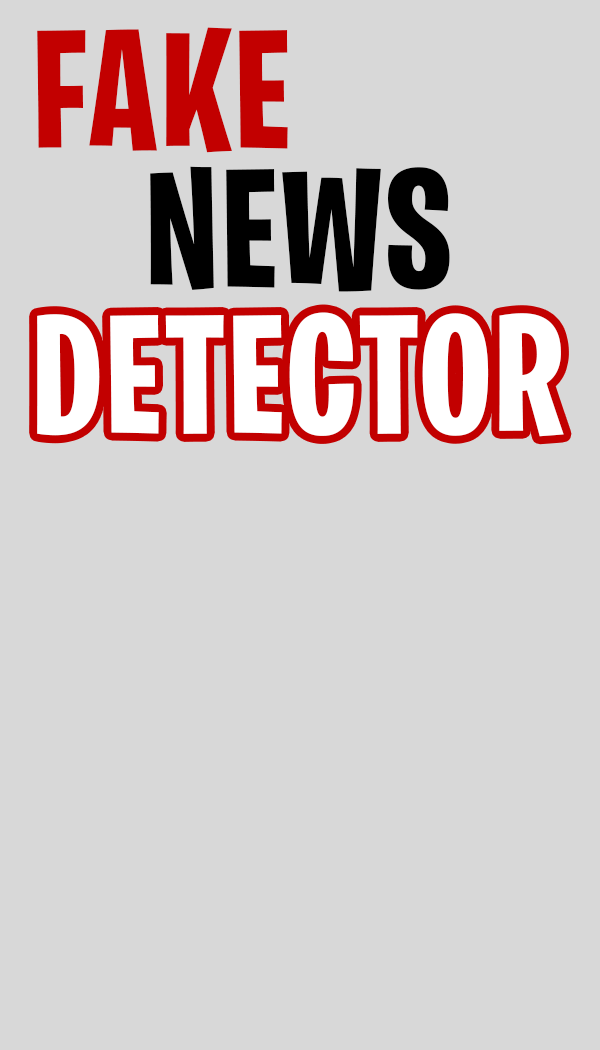
<style>
.page{position:relative;width:600px;height:1050px;background:#d8d8d8}
.page>*{position:absolute;margin:0}
.t1{font:168.9px "BurbankBigCondensed-Bold";letter-spacing:0.025em;color:#c20000}
.t2{font:168.9px "BurbankBigCondensed-Bold";letter-spacing:0.025em;color:#000000}
.t3{font:168.9px "BurbankBigCondensed-Bold";letter-spacing:0.025em;color:#ffffff}
</style>
<div class="page">
<p class="t1" style="left:37px;top:27px;width:251px;height:126px">FAKE</p>
<p class="t2" style="left:150px;top:166px;width:300px;height:126px">NEWS</p>
<p class="t3" style="left:37px;top:312px;width:527px;height:125px">DETECTOR</p>
</div>
